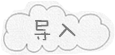
<style>
.page{position:relative;width:115px;height:55px;background:#ffffff}
.page>*{position:absolute;margin:0}
.t1{font:25.3px "DFPWaWaW5";letter-spacing:-0.025em;color:#797979}
</style>
<div class="page">
<p class="t1" style="left:34px;top:20px;width:42px;height:21px">导入</p>
</div>
